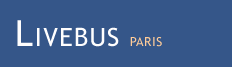
<style>
.page{position:relative;width:232px;height:67px;background:#355689}
.page>*{position:absolute;margin:0}
.t1{font:36px "TrebuchetMS";letter-spacing:0.05em;color:#fffefe;font-variant:small-caps}
.t2{font:18px "TrebuchetMS";letter-spacing:0.05em;color:#ffcc99;font-variant:small-caps}
</style>
<div class="page">
<p class="t1" style="left:17px;top:20px;width:102px;height:27px">Livebus</p>
<p class="t2" style="left:130px;top:37px;width:32px;height:10px">paris</p>
</div>
